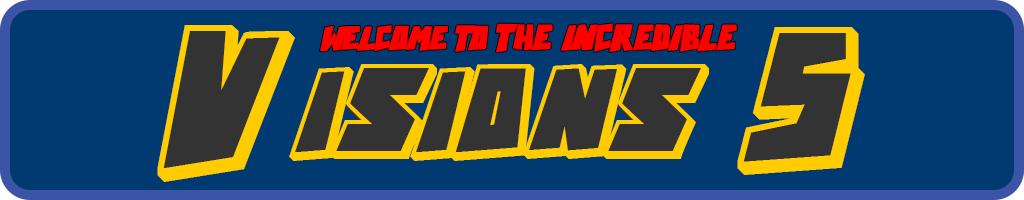
<style>
.page{position:relative;width:1024px;height:200px;background:#003a70}
.page>*{position:absolute;margin:0}
.t1{font:58.5px/282.3px "ActionComics";color:#ffcc00}
.t2{font:89.9px/282.3px "ActionComics";color:#ffcc00}
.t3{font:18.5px "ActionComcsBlack";color:#ff0000}
.t4{font:17.1px "ActionComcsBlack";color:#ff0000}
</style>
<div class="page">
<p class="t1" style="left:157px;top:25px;width:708px;height:157px;text-align:center"><span class="t2">V</span>ISIONS<span class="t2"> 5</span></p>
<p class="t3" style="left:320px;top:23px;width:417px;height:30px"><span class="t4">WELCOME TO </span>THE INCREDIBLE</p>
</div>
